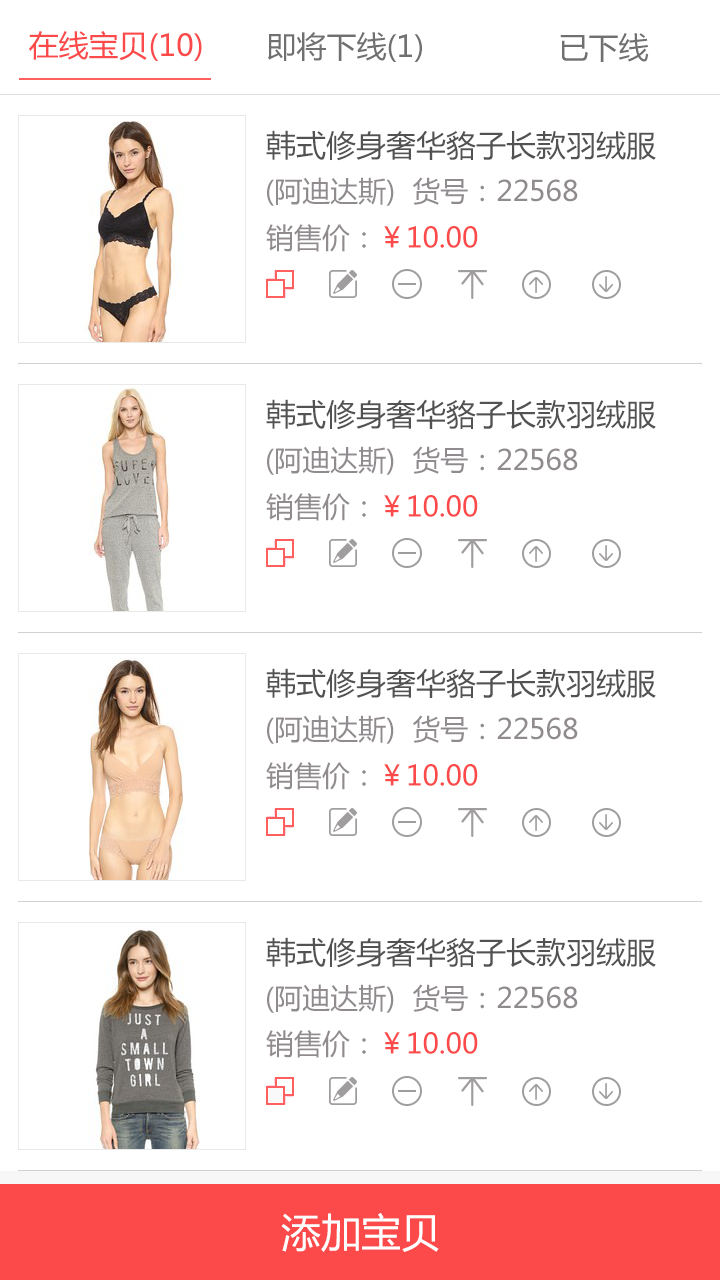
<style>
.page{position:relative;width:720px;height:1280px;background:#ffffff}
.page>*{position:absolute;margin:0}
.t1{font:30px "MicrosoftYaHei";color:#fc4a4a}
.t2{font:30px "MicrosoftYaHei";color:#707070}
.t3{font:30px "MicrosoftYaHei";color:#525252}
.t4{font:28px "MicrosoftYaHei";color:#908b8e}
.t5{font:28px "MicrosoftYaHei";color:#fc4a4a}
.t6{font:40px "MicrosoftYaHei";color:#ffffff}
</style>
<div class="page">
<p class="t1" style="left:29px;top:31px;width:173px;height:30px">在线宝贝(10)</p>
<p class="t2" style="left:268px;top:32px;width:154px;height:30px">即将下线(1)</p>
<p class="t2" style="left:560px;top:33px;width:89px;height:29px">已下线</p>
<p class="t3" style="left:266px;top:130px;width:390px;height:31px">韩式修身奢华貉子长款羽绒服</p>
<p class="t4" style="left:267px;top:177px;width:311px;height:29px">(阿迪达斯)  货号：22568</p>
<p class="t5" style="left:266px;top:224px;width:212px;height:28px"><span class="t4">销售价：</span>￥10.00</p>
<p class="t3" style="left:266px;top:399px;width:390px;height:31px">韩式修身奢华貉子长款羽绒服</p>
<p class="t4" style="left:267px;top:446px;width:311px;height:29px">(阿迪达斯)  货号：22568</p>
<p class="t5" style="left:266px;top:493px;width:212px;height:28px"><span class="t4">销售价：</span>￥10.00</p>
<p class="t3" style="left:266px;top:668px;width:390px;height:31px">韩式修身奢华貉子长款羽绒服</p>
<p class="t4" style="left:267px;top:715px;width:311px;height:29px">(阿迪达斯)  货号：22568</p>
<p class="t5" style="left:266px;top:762px;width:212px;height:28px"><span class="t4">销售价：</span>￥10.00</p>
<p class="t3" style="left:266px;top:937px;width:390px;height:31px">韩式修身奢华貉子长款羽绒服</p>
<p class="t4" style="left:267px;top:984px;width:311px;height:29px">(阿迪达斯)  货号：22568</p>
<p class="t5" style="left:266px;top:1030px;width:212px;height:28px"><span class="t4">销售价：</span>￥10.00</p>
<p class="t6" style="left:281px;top:1213px;width:158px;height:39px">添加宝贝</p>
</div>
